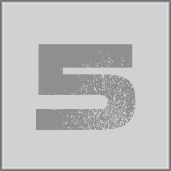
<style>
.page{position:relative;width:171px;height:171px;background:#d1d1d1}
.page>*{position:absolute;margin:0}
.t1{font:121px "Coalition";color:#8f8f8f}
</style>
<div class="page">
<p class="t1" style="left:36px;top:44px;width:100px;height:87px">5</p>
<p class="t1" style="left:36px;top:44px;width:100px;height:87px">5</p>
<p class="t1" style="left:36px;top:44px;width:100px;height:87px">5</p>
</div>
